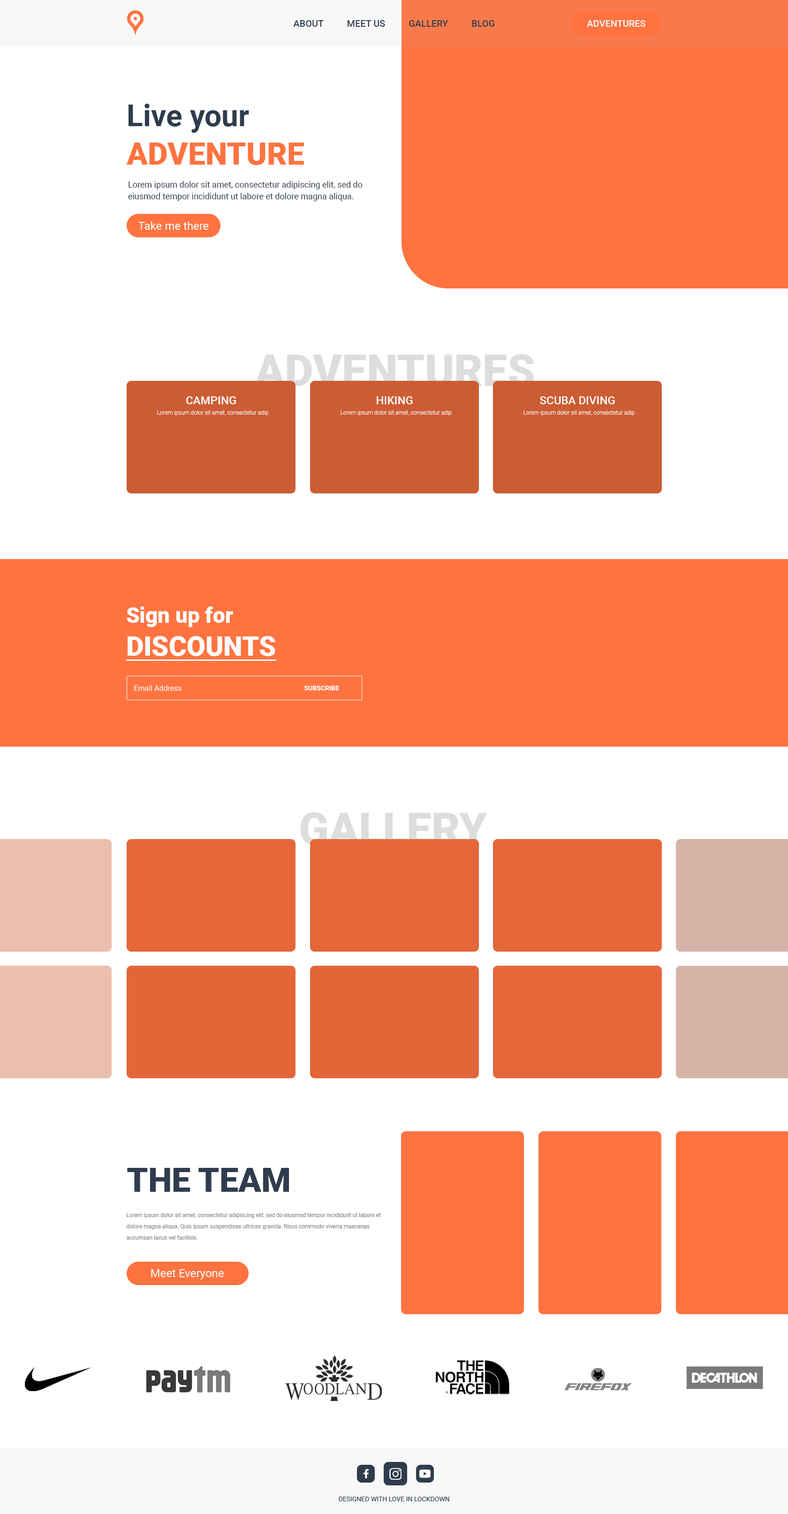
<style>
.page{position:relative;width:788px;height:1514px;background:#ffffff}
.page>*{position:absolute;margin:0}
.t1{font:9.4px "Roboto-Medium";color:#2f3c4d;text-transform:uppercase}
.t2{font:9.4px "Roboto-Medium";color:#ffffff;text-transform:uppercase}
.t3{font:30px/38.5px "Roboto-Bold";color:#2f3c4d}
.t4{font:30.9px/38.5px "Roboto-Black";color:#ff7340;text-transform:uppercase}
.t5{font:8.4px/11.7px "Roboto-Regular";color:#2f3c4d}
.t6{font:11.3px "Roboto-Regular";color:#ffffff}
.t7{font:44.1px "Roboto-Black";color:#dddddd;text-transform:uppercase}
.t8{font:11.3px "Roboto-Medium";color:#ffffff;text-transform:uppercase}
.t9{font:5.6px "Roboto-Light";color:#ffffff}
.t10{font:21.6px "Roboto-Black";color:#ffffff}
.t11{font:27.2px "Roboto-Black";color:#ffffff;text-transform:uppercase;text-decoration:underline}
.t12{font:7.5px "Roboto-Regular";color:#ffffff}
.t13{font:6.6px "Roboto-Bold";color:#ffffff;text-transform:uppercase}
.t14{font:33.8px "Roboto-Black";color:#2f3c4d;text-transform:uppercase}
.t15{font:5.6px/11.3px "Roboto-Regular";color:#828282}
.t16{font:6.6px "Roboto-Regular";color:#2f3c4d;text-transform:uppercase}
</style>
<div class="page">
<p class="t1" style="left:293px;top:20px;width:202px;height:7px">about          meet us          gallery          blog</p>
<p class="t2" style="left:587px;top:20px;width:58px;height:7px">adventures</p>
<p class="t3" style="left:126px;top:104px;width:178px;height:61px">Live your<br><span class="t4">adventure</span></p>
<p class="t5" style="left:128px;top:181px;width:234px;height:20px">Lorem ipsum dolor sit amet, consectetur adipiscing elit, sed do eiusmod tempor incididunt ut labore et dolore magna aliqua.</p>
<p class="t6" style="left:138px;top:221px;width:71px;height:9px">Take me there</p>
<p class="t7" style="left:254px;top:354px;width:280px;height:32px">adventures</p>
<p class="t8" style="left:186px;top:396px;width:50px;height:8px">camping</p>
<p class="t8" style="left:377px;top:396px;width:36px;height:8px">hiking</p>
<p class="t8" style="left:540px;top:396px;width:75px;height:8px">scuba diving</p>
<p class="t9" style="left:157px;top:410px;width:111px;height:5px">Lorem ipsum dolor sit amet, consectetur adip</p>
<p class="t9" style="left:340px;top:410px;width:112px;height:5px">Lorem ipsum dolor sit amet, consectetur adip</p>
<p class="t9" style="left:523px;top:410px;width:111px;height:5px">Lorem ipsum dolor sit amet, consectetur adip</p>
<p class="t10" style="left:126px;top:606px;width:150px;height:55px">Sign up for <br><span class="t11">Discounts</span></p>
<p class="t12" style="left:134px;top:685px;width:48px;height:6px">Email Address</p>
<p class="t13" style="left:304px;top:686px;width:35px;height:4px">Subscribe</p>
<p class="t7" style="left:300px;top:812px;width:187px;height:33px">gallery</p>
<p class="t14" style="left:127px;top:1168px;width:162px;height:24px">the team</p>
<p class="t15" style="left:126px;top:1213px;width:255px;height:26px">Lorem ipsum dolor sit amet, consectetur adipiscing elit, sed do eiusmod tempor incididunt ut labore et dolore magna aliqua. Quis ipsum suspendisse ultrices gravida. Risus commodo viverra maecenas accumsan lacus vel facilisis.</p>
<p class="t6" style="left:151px;top:1269px;width:73px;height:10px">Meet Everyone</p>
<p class="t16" style="left:339px;top:1496px;width:110px;height:5px">Designed with love in Lockdown</p>
</div>
